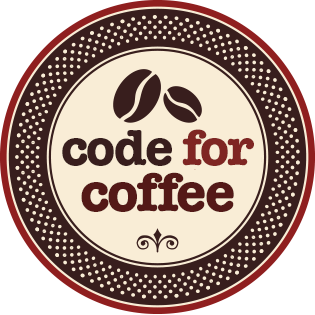
<style>
.page{position:relative;width:315px;height:315px;background:#381e1d}
.page>*{position:absolute;margin:0}
.t1{font:52px "AmericanTypewriter-Bold";letter-spacing:-0.04em;color:#381e1d}
.t2{font:52px "AmericanTypewriter-Bold";letter-spacing:-0.04em;color:#7f2623}
.t3{font:56px "AmericanTypewriter-Bold";letter-spacing:-0.04em;color:#541917}
</style>
<div class="page">
<p class="t1" style="left:62px;top:129px;width:192px;height:37px">code <span class="t2">for</span></p>
<p class="t3" style="left:81px;top:172px;width:153px;height:40px">coffee</p>
</div>
